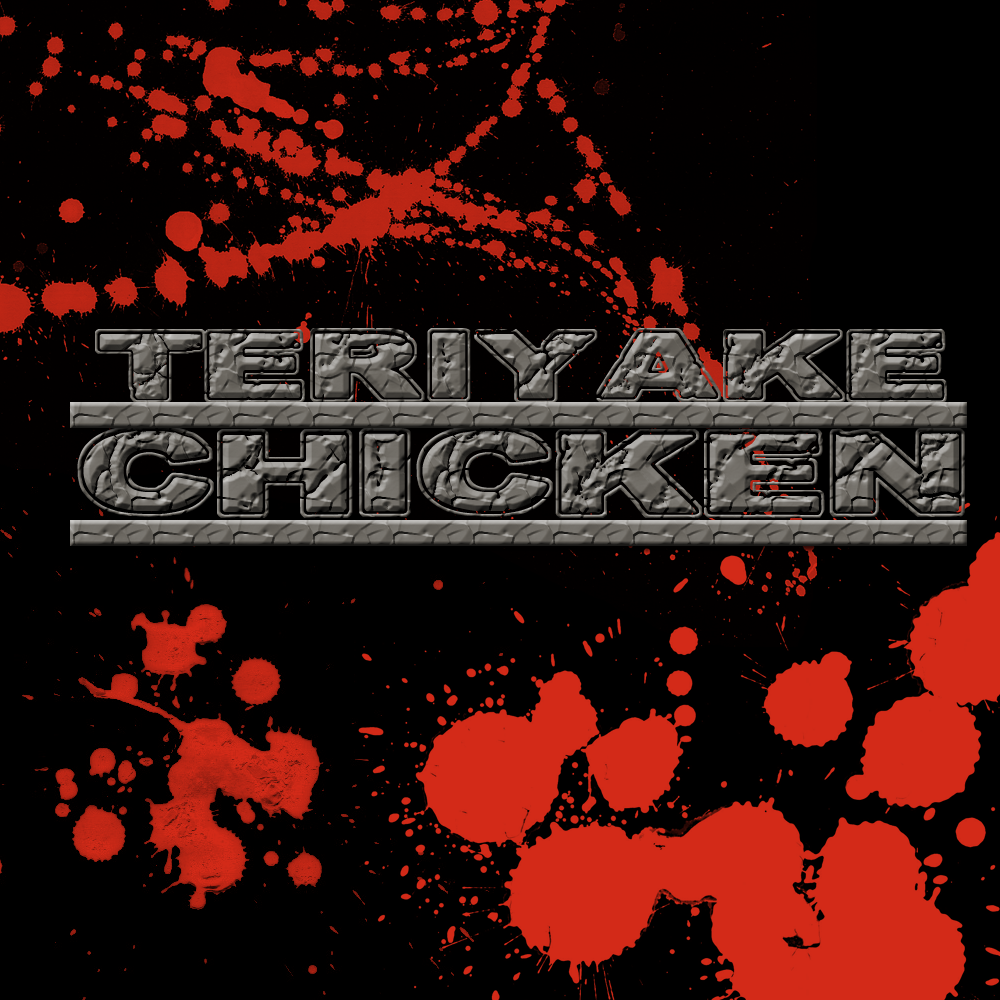
<style>
.page{position:relative;width:1000px;height:1000px;background:#000000}
.page>*{position:absolute;margin:0}
.t1{font:150px "CFCrackedStone-Regular"}
.t2{font:180px "CFCrackedStone-Regular"}
</style>
<div class="page">
<p class="t1" style="left:95px;top:328px;width:852px;height:75px">TERIYAKE</p>
<p class="t2" style="left:77px;top:425px;width:888px;height:93px">CHICKEN</p>
</div>
